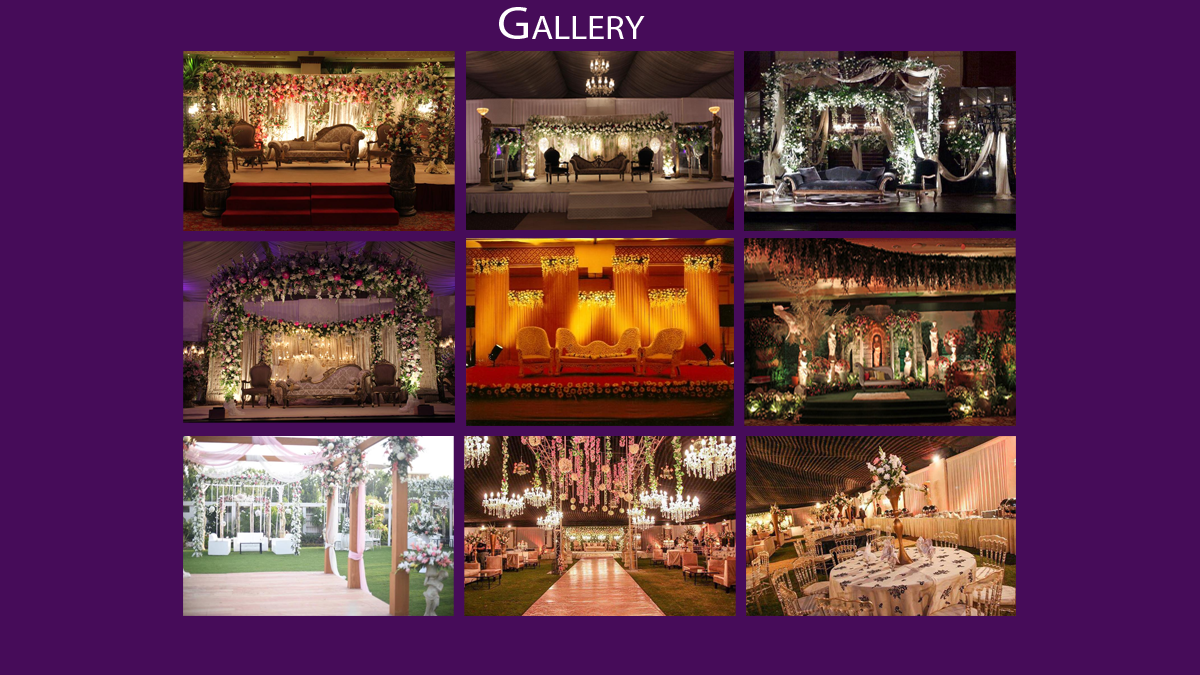
<style>
.page{position:relative;width:1200px;height:675px;background:#460c59}
.page>*{position:absolute;margin:0}
.t1{font:46.9px "MyriadPro-Regular";color:#ffffff;font-variant:small-caps;scale:1.11 1}
</style>
<div class="page">
<p class="t1" style="left:499px;top:7px;width:146px;height:32px">Gallery</p>
</div>
